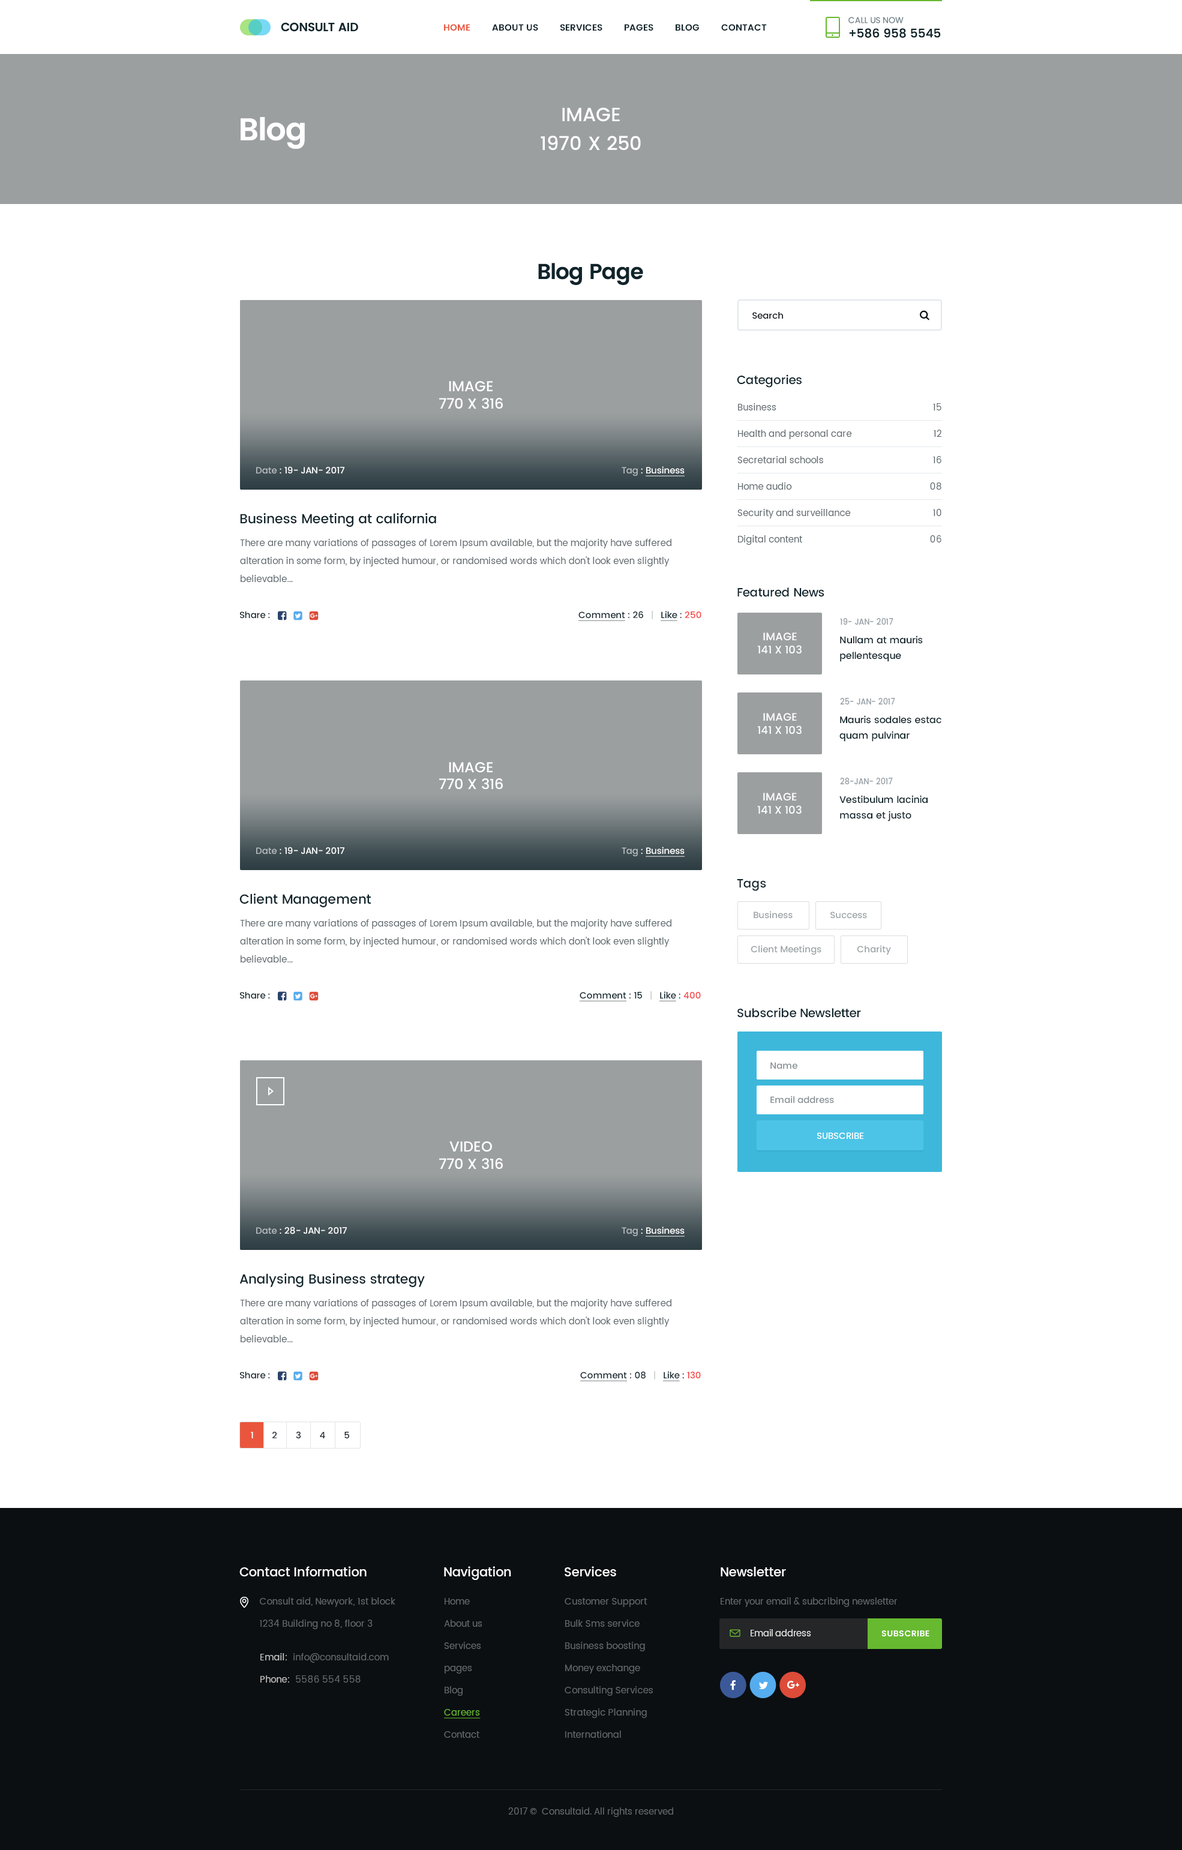
<style>
.page{position:relative;width:1182px;height:1850px;background:#ffffff}
.page>*{position:absolute;margin:0}
.t1{font:12px "Poppins-Medium";letter-spacing:-0.005em;color:#10242b;text-transform:uppercase}
.t2{font:8.4px "Poppins-Regular";letter-spacing:-0.005em;color:#718389;text-transform:uppercase}
.t3{font:9px "Poppins-SemiBold";color:#10242b;text-transform:uppercase}
.t4{font:9px "Poppins-SemiBold";color:#e9563d;text-transform:uppercase}
.t5{font:19.2px/28.8px "Poppins-Medium";color:#ffffff;text-transform:uppercase}
.t6{font:31.3px "Poppins-SemiBold";letter-spacing:-0.03em;color:#ffffff}
.t7{font:21.6px "Poppins-SemiBold";letter-spacing:-0.03em;color:#10242b}
.t8{font:9px "Poppins-Medium";color:#0b0f12}
.t9{font:12px "Poppins-Medium";letter-spacing:-0.01em;color:#10242b}
.t10{font:14.4px "Poppins-Medium";color:#ffffff;text-transform:uppercase}
.t11{font:9px/26.4px "Poppins-Regular";letter-spacing:0.01em;color:#5c666a}
.t12{font:9px "Poppins-Medium";letter-spacing:-0.01em;color:#ffffff}
.t13{font:9px "Poppins-Medium";letter-spacing:-0.01em;color:#b5bbc1}
.t14{font:9px "Poppins-Medium";letter-spacing:-0.01em;color:#ffffff;text-decoration:underline}
.t15{font:13.2px "Poppins-Medium";letter-spacing:-0.01em;color:#10242b}
.t16{font:9px/18px "Poppins-Regular";letter-spacing:0.01em;color:#5c666a}
.t17{font:9px "Poppins-Medium";letter-spacing:-0.01em;color:#10242b}
.t18{font:9px "Poppins-Medium";letter-spacing:-0.01em;color:#10242b;text-decoration:underline}
.t19{font:9px "Poppins-Medium";letter-spacing:-0.01em;color:#cccece}
.t20{font:9px "Poppins-Medium";letter-spacing:-0.01em;color:#f74242}
.t21{font:7.8px "Poppins-Medium";letter-spacing:-0.01em;color:#98a0a6}
.t22{font:10.8px "Poppins-Medium";color:#ffffff;text-transform:uppercase}
.t23{font:9.6px/15.6px "Poppins-Medium";letter-spacing:-0.01em;color:#10242b}
.t24{font:9px "Poppins-Medium";color:#9ba3a5}
.t25{font:9px "Poppins-Medium";color:#858f93}
.t26{font:9px "Poppins-Medium";color:#ffffff}
.t27{font:12.6px "Poppins-Medium";letter-spacing:-0.01em;color:#ffffff}
.t28{font:9px/22.2px "Poppins-Regular";letter-spacing:0.01em;color:#64676a}
.t29{font:9px/22.2px "Poppins-Regular";color:#64676a}
.t30{font:9px/22.2px "Poppins-Regular";color:#67b930;text-decoration:underline}
.t31{font:9px "Poppins-Regular";color:#64676a}
.t32{font:8.7px "Poppins-Regular";color:#ececec}
.t33{font:8.4px "Poppins-SemiBold";letter-spacing:0.025em;color:#ffffff;text-transform:uppercase}
.t34{font:9px/22.2px "Poppins-Regular";letter-spacing:0.01em;color:#c5c5c5}
.t35{font:9px/22.2px "Poppins-Regular";letter-spacing:0.01em;color:#c4c4c4}
</style>
<div class="page">
<p class="t1" style="left:848px;top:17px;width:93px;height:21px"><span class="t2">Call us now<br></span>+586 958 5545</p>
<p class="t3" style="left:444px;top:24px;width:323px;height:7px"><span class="t4">Home</span>         about us         services         Pages         blog         contact</p>
<p class="t5" style="left:541px;top:107px;width:100px;height:43px;text-align:center">Image<br>1970 x 250</p>
<p class="t6" style="left:241px;top:117px;width:64px;height:32px">Blog</p>
<p class="t7" style="left:538px;top:263px;width:105px;height:22px">Blog Page</p>
<p class="t8" style="left:752px;top:312px;width:31px;height:7px">Search</p>
<p class="t9" style="left:737px;top:374px;width:65px;height:14px">Categories</p>
<p class="t10" style="left:439px;top:381px;width:64px;height:28px;text-align:center">Image<br>770 x 316</p>
<p class="t11" style="left:737px;top:403px;width:115px;height:142px">Business<br>Health and personal care<br>Secretarial schools<br>Home audio<br>Security and surveillance<br>Digital content</p>
<p class="t11" style="left:930px;top:403px;width:12px;height:139px;text-align:right">15<br>12<br>16<br>08<br>10<br>06</p>
<p class="t12" style="left:256px;top:466px;width:88px;height:8px"><span class="t13">Date </span>: 19- JAN- 2017</p>
<p class="t14" style="left:622px;top:466px;width:63px;height:10px"><span class="t13">Tag</span><span class="t12"> : </span>Business</p>
<p class="t15" style="left:240px;top:513px;width:196px;height:14px">Business Meeting at california</p>
<p class="t16" style="left:240px;top:539px;width:431px;height:43px">There are many variations of passages of Lorem Ipsum available, but the majority have suffered alteration in some form, by injected humour, or randomised words which don't look even slightly believable...</p>
<p class="t9" style="left:737px;top:587px;width:87px;height:10px">Featured News</p>
<p class="t17" style="left:240px;top:611px;width:30px;height:8px">Share :</p>
<p class="t18" style="left:578px;top:611px;width:123px;height:10px">Comment<span class="t17"> : 26   </span><span class="t19">|   </span>Like<span class="t17"> : </span><span class="t20">250</span></p>
<p class="t21" style="left:840px;top:618px;width:53px;height:7px">19- JAN- 2017</p>
<p class="t22" style="left:758px;top:632px;width:44px;height:21px;text-align:center">Image<br>141 x 103</p>
<p class="t23" style="left:840px;top:635px;width:83px;height:27px">Nullam at mauris <br>pellentesque</p>
<p class="t21" style="left:840px;top:698px;width:55px;height:6px">25- JAN- 2017</p>
<p class="t22" style="left:758px;top:713px;width:44px;height:21px;text-align:center">Image<br>141 x 103</p>
<p class="t23" style="left:839px;top:715px;width:102px;height:27px">Mauris sodales estac<br>quam pulvinar</p>
<p class="t10" style="left:439px;top:762px;width:64px;height:27px;text-align:center">Image<br>770 x 316</p>
<p class="t21" style="left:840px;top:778px;width:53px;height:6px">28-JAN- 2017</p>
<p class="t22" style="left:757px;top:793px;width:45px;height:21px;text-align:center">Image<br>141 x 103</p>
<p class="t23" style="left:839px;top:795px;width:89px;height:26px">Vestibulum lacinia <br>massa et justo</p>
<p class="t12" style="left:256px;top:847px;width:88px;height:7px"><span class="t13">Date </span>: 19- JAN- 2017</p>
<p class="t14" style="left:622px;top:847px;width:63px;height:10px"><span class="t13">Tag</span><span class="t12"> : </span>Business</p>
<p class="t9" style="left:737px;top:879px;width:29px;height:12px">Tags</p>
<p class="t15" style="left:239px;top:893px;width:132px;height:14px">Client Management</p>
<p class="t24" style="left:754px;top:911px;width:39px;height:8px">Business</p>
<p class="t24" style="left:830px;top:911px;width:37px;height:8px">Success</p>
<p class="t16" style="left:240px;top:919px;width:431px;height:43px">There are many variations of passages of Lorem Ipsum available, but the majority have suffered alteration in some form, by injected humour, or randomised words which don't look even slightly believable...</p>
<p class="t24" style="left:751px;top:945px;width:70px;height:10px">Client Meetings</p>
<p class="t24" style="left:857px;top:945px;width:34px;height:10px">Charity</p>
<p class="t17" style="left:240px;top:992px;width:30px;height:7px">Share :</p>
<p class="t18" style="left:580px;top:991px;width:121px;height:10px">Comment<span class="t17"> : 15   </span><span class="t19">|   </span>Like<span class="t17"> : </span><span class="t20">400</span></p>
<p class="t9" style="left:737px;top:1007px;width:124px;height:11px">Subscribe Newsletter</p>
<p class="t25" style="left:770px;top:1062px;width:27px;height:7px">Name</p>
<p class="t25" style="left:770px;top:1096px;width:64px;height:7px">Email address</p>
<p class="t26" style="left:817px;top:1132px;width:46px;height:7px">SUBSCRIBE</p>
<p class="t10" style="left:439px;top:1141px;width:64px;height:28px;text-align:center">video<br>770 x 316</p>
<p class="t12" style="left:256px;top:1226px;width:91px;height:8px"><span class="t13">Date </span>: 28- JAN- 2017</p>
<p class="t14" style="left:622px;top:1226px;width:63px;height:11px"><span class="t13">Tag</span><span class="t12"> : </span>Business</p>
<p class="t15" style="left:239px;top:1273px;width:186px;height:14px">Analysing Business strategy</p>
<p class="t16" style="left:240px;top:1299px;width:431px;height:43px">There are many variations of passages of Lorem Ipsum available, but the majority have suffered alteration in some form, by injected humour, or randomised words which don't look even slightly believable...</p>
<p class="t17" style="left:240px;top:1372px;width:30px;height:7px">Share :</p>
<p class="t18" style="left:580px;top:1371px;width:121px;height:10px">Comment<span class="t17"> : 08   </span><span class="t19">|   </span>Like<span class="t17"> : </span><span class="t20">130</span></p>
<p class="t17" style="left:251px;top:1431px;width:98px;height:7px"><span class="t12">1</span>        2        3        4        5</p>
<p class="t27" style="left:239px;top:1566px;width:128px;height:10px">Contact Information</p>
<p class="t27" style="left:444px;top:1566px;width:67px;height:14px">Navigation</p>
<p class="t27" style="left:565px;top:1566px;width:51px;height:10px">Services</p>
<p class="t27" style="left:721px;top:1567px;width:65px;height:9px">Newsletter</p>
<p class="t28" style="left:260px;top:1597px;width:135px;height:32px">Consult aid, Newyork, 1st block <br>1234 Building no 8, floor 3</p>
<p class="t29" style="left:444px;top:1598px;width:38px;height:140px">Home<br>About us<br>Services<br>pages<br>Blog<br><span class="t30">Careers<br></span>Contact</p>
<p class="t28" style="left:565px;top:1598px;width:88px;height:140px">Customer Support<br>Bulk Sms service<br>Business boosting<br>Money exchange<br>Consulting Services<br>Strategic Planning<br>International</p>
<p class="t31" style="left:721px;top:1597px;width:177px;height:10px">Enter your email &amp; subcribing newsletter</p>
<p class="t32" style="left:751px;top:1629px;width:60px;height:7px">Email address</p>
<p class="t33" style="left:881px;top:1630px;width:48px;height:6px">Subscribe</p>
<p class="t28" style="left:260px;top:1653px;width:129px;height:29px"><span class="t34">Email:</span>  info@consultaid.com<br><span class="t35">Phone:</span>  5586 554 558</p>
<p class="t31" style="left:508px;top:1807px;width:165px;height:10px">2017 ©  Consultaid. All rights reserved</p>
</div>
